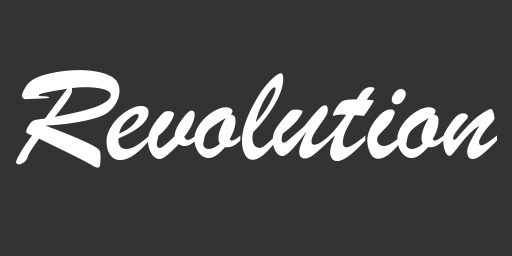
<style>
.page{position:relative;width:512px;height:256px;background:#333333}
.page>*{position:absolute;margin:0}
.t1{font:144px "STXingkai";color:#ffffff}
</style>
<div class="page">
<p class="t1" style="left:16px;top:70px;width:481px;height:98px">Revolution</p>
</div>
